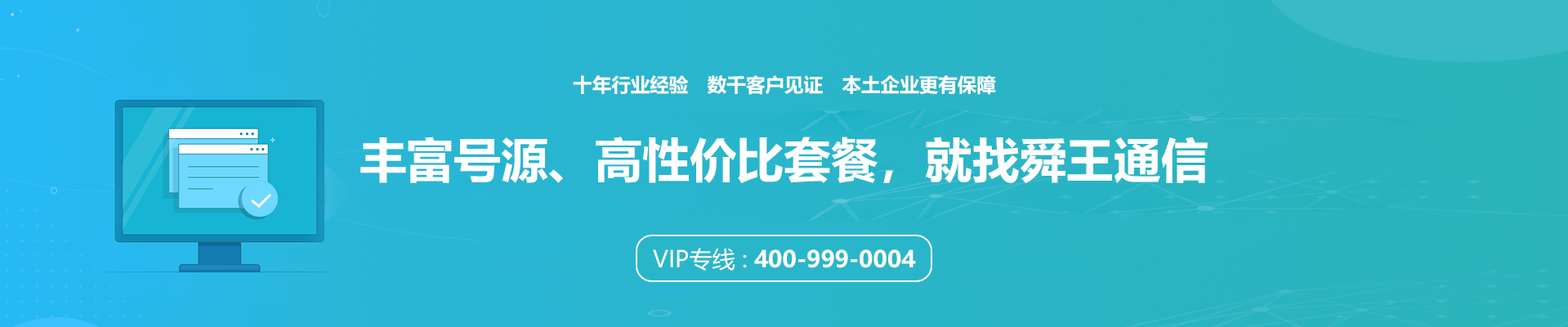
<style>
.page{position:relative;width:1568px;height:327px}
.page>*{position:absolute;margin:0}
.t1{font:19.2px "MicrosoftYaHei-Bold";color:#ffffff;text-transform:uppercase}
.t2{font:47.2px "MicrosoftYaHei-Bold";color:#ffffff;text-transform:uppercase}
.t3{font:22.9px "MicrosoftYaHei-Bold";color:#ffffff;text-transform:uppercase}
.t4{font:22.9px "MicrosoftYaHei";color:#ffffff;text-transform:uppercase}
</style>
<div class="page">
<p class="t1" style="left:573px;top:75px;width:423px;height:20px">十年行业经验　数千客户见证　本土企业更有保障</p>
<p class="t2" style="left:360px;top:136px;width:848px;height:48px">丰富号源、高性价比套餐，就找舜王通信</p>
<p class="t3" style="left:653px;top:248px;width:263px;height:22px"><span class="t4">VIP专线 : </span>400-999-0004</p>
</div>
